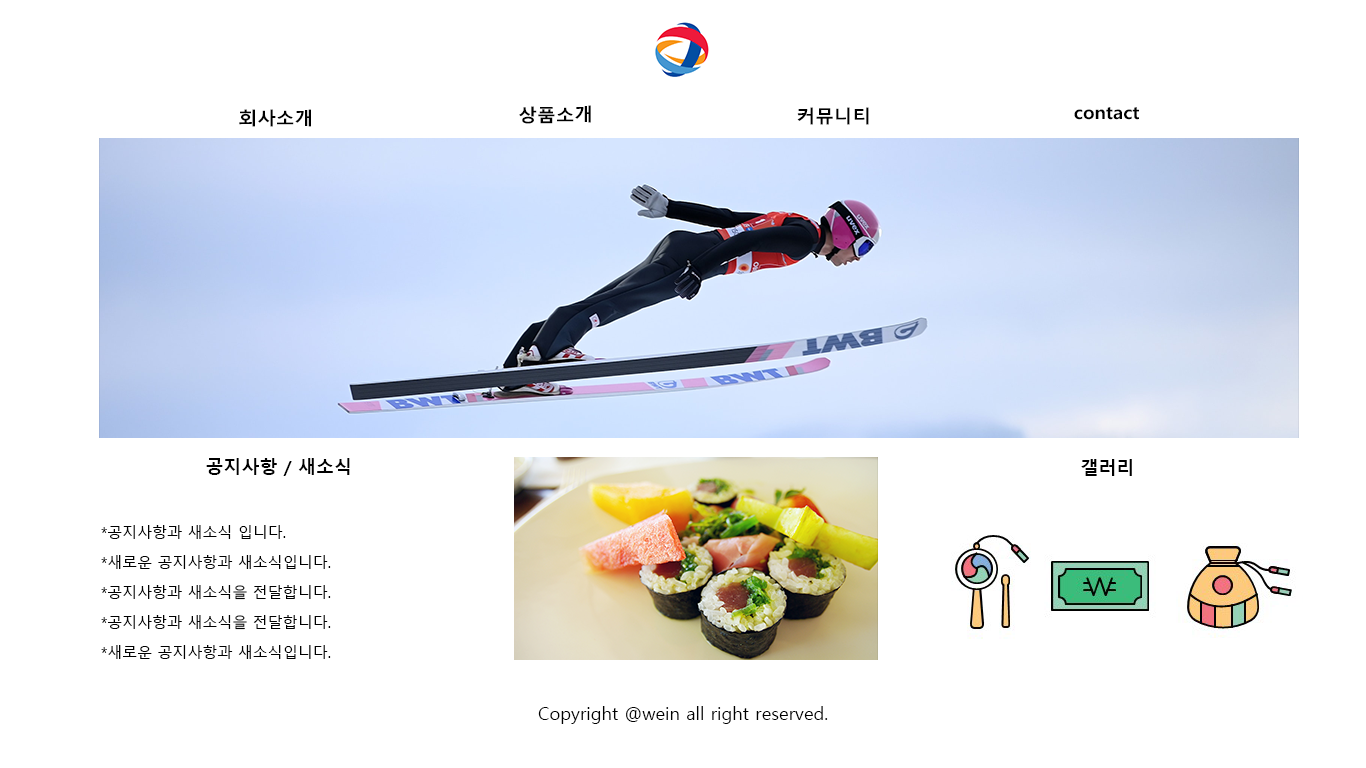
<style>
.page{position:relative;width:1366px;height:768px;background:#ffffff}
.page>*{position:absolute;margin:0}
.t1{font:18px "MalgunGothicBold";color:#000000;scale:1.04 1}
.t2{font:18px "MalgunGothicBold";color:#000000}
.t3{font:15px/30px "MalgunGothic";color:#000000}
.t4{font:18px "MalgunGothic";color:#000000}
</style>
<div class="page">
<p class="t1" style="left:239px;top:109px;width:72px;height:18px">회사소개</p>
<p class="t1" style="left:519px;top:105px;width:72px;height:19px">상품소개</p>
<p class="t1" style="left:797px;top:107px;width:72px;height:18px">커뮤니티</p>
<p class="t1" style="left:1074px;top:107px;width:65px;height:13px">contact</p>
<p class="t2" style="left:206px;top:458px;width:144px;height:18px">공지사항 / 새소식</p>
<p class="t2" style="left:1081px;top:459px;width:51px;height:17px">갤러리</p>
<p class="t3" style="left:101px;top:525px;width:230px;height:134px">*공지사항과 새소식 입니다.<br>*새로운 공지사항과 새소식입니다.<br>*공지사항과 새소식을 전달합니다.<br>*공지사항과 새소식을 전달합니다.<br>*새로운 공지사항과 새소식입니다.</p>
<p class="t4" style="left:538px;top:706px;width:290px;height:18px">Copyright @wein all right reserved.</p>
</div>
